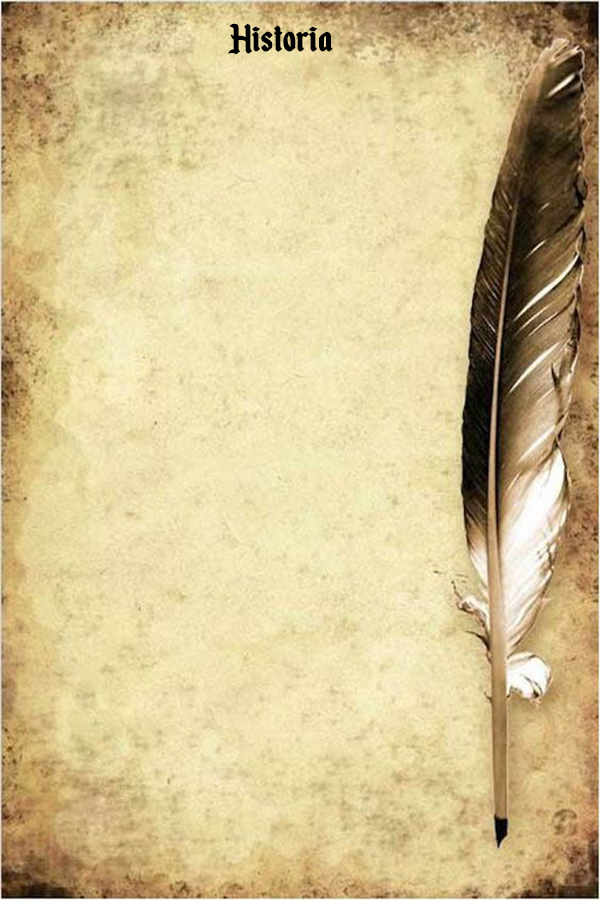
<style>
.page{position:relative;width:600px;height:900px}
.page>*{position:absolute;margin:0}
.t1{font:45.2px "EnchantedLand";color:#000000;font-weight:bold;scale:0.94 1}
</style>
<div class="page">
<p class="t1" style="left:228px;top:23px;width:105px;height:31px">Historia</p>
</div>
